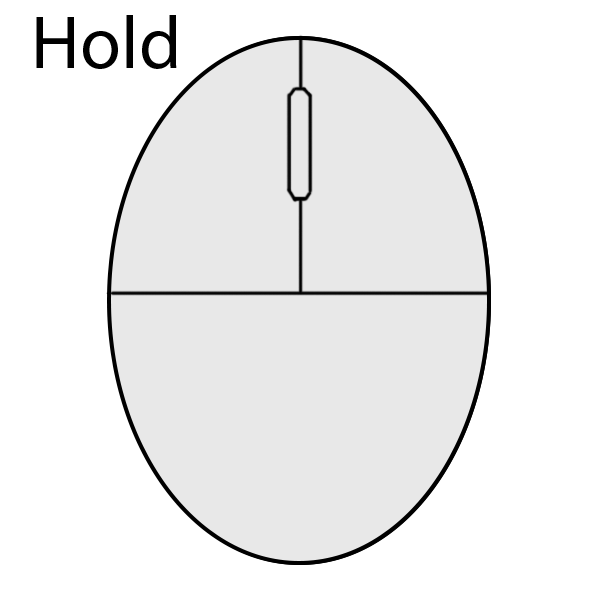
<style>
.page{position:relative;width:600px;height:600px;background:#ffffff}
.page>*{position:absolute;margin:0}
.t1{font:75px "MyriadPro-Regular";color:#000000}
</style>
<div class="page">
<p class="t1" style="left:36px;top:15px;width:141px;height:54px">Hold</p>
</div>
